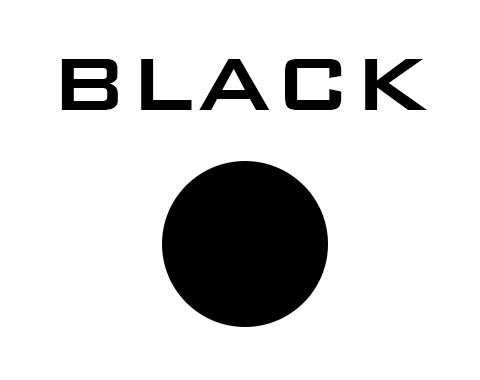
<style>
.page{position:relative;width:480px;height:380px;background:#ffffff}
.page>*{position:absolute;margin:0}
.t1{font:99.6px "BankGothicBT-Medium";color:#000000}
</style>
<div class="page">
<p class="t1" style="left:61px;top:59px;width:367px;height:51px">BLACK</p>
</div>
